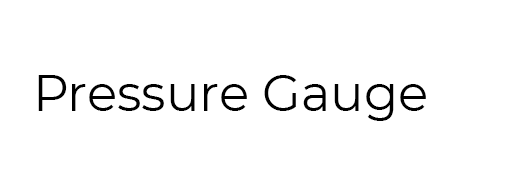
<style>
.page{position:relative;width:525px;height:180px;background:#ffffff}
.page>*{position:absolute;margin:0}
.t1{font:50px "Montserrat-Regular";color:#000000}
</style>
<div class="page">
<p class="t1" style="left:38px;top:75px;width:388px;height:46px">Pressure Gauge</p>
</div>
